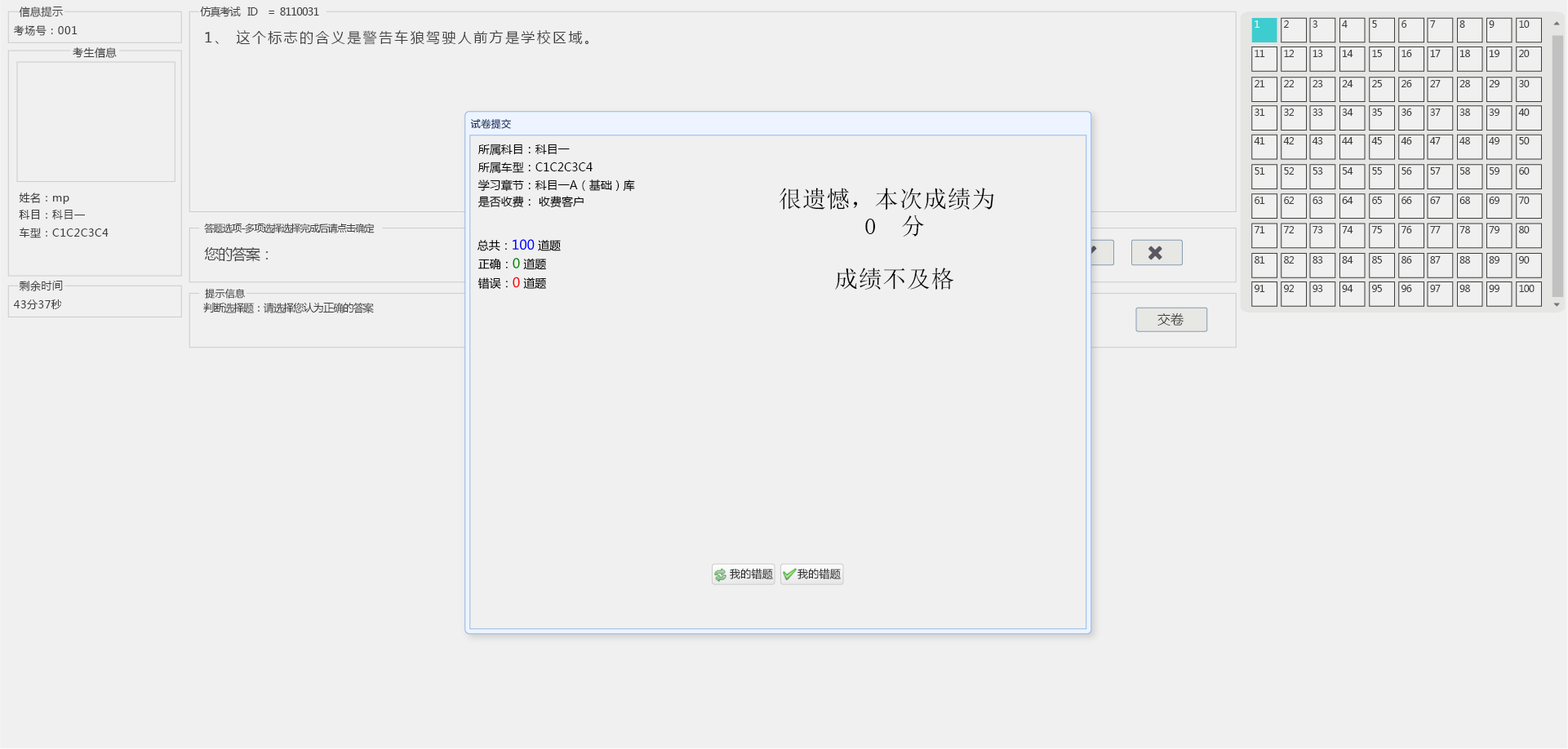
<style>
.page{position:relative;width:1568px;height:749px;background:#f0f0f0}
.page>*{position:absolute;margin:0}
.t1{font:10.6px "MicrosoftYaHei";letter-spacing:0.04em;color:#3e3e3e}
.t2{font:10.6px "MicrosoftYaHei";letter-spacing:-0.06em;color:#3e3e3e}
.t3{font:9.8px "MicrosoftYaHei";letter-spacing:-0.06em;color:#ffffff}
.t4{font:9.8px "MicrosoftYaHei";letter-spacing:-0.06em;color:#3e3e3e}
.t5{font:13.9px "MicrosoftYaHei";letter-spacing:0.14em;color:#3e3e3e}
.t6{font:9.8px "MicrosoftYaHei";letter-spacing:0.04em;color:#0d2d61}
.t7{font:11.4px "MicrosoftYaHei";color:#000000}
.t8{font:11.4px/17px "MicrosoftYaHei";color:#000000}
.t9{font:10.6px/17.6px "MicrosoftYaHei";letter-spacing:0.04em;color:#3e3e3e}
.t10{font:23.7px/27.1px "SimSun";letter-spacing:0.02em;color:#000000}
.t11{font:14.7px "MicrosoftYaHei";letter-spacing:-0.06em;color:#3e3e3e}
.t12{font:23.7px "SimSun";letter-spacing:0.02em;color:#000000}
.t13{font:9.8px "MicrosoftYaHei";letter-spacing:0.02em;color:#3e3e3e}
.t14{font:13.1px "MicrosoftYaHei";color:#3e3e3e}
.t15{font:10.6px "MicrosoftYaHei";letter-spacing:0.02em;color:#333333}
</style>
<div class="page">
<p class="t1" style="left:19px;top:7px;width:44px;height:10px">信息提示</p>
<p class="t2" style="left:200px;top:7px;width:119px;height:10px">仿真考试   ID    =  8110031</p>
<p class="t1" style="left:14px;top:25px;width:64px;height:11px">考场号：001</p>
<p class="t3" style="left:1255px;top:20px;width:4px;height:8px">1</p>
<p class="t4" style="left:1284px;top:20px;width:5px;height:8px">2</p>
<p class="t4" style="left:1313px;top:20px;width:4px;height:8px">3</p>
<p class="t4" style="left:1342px;top:20px;width:6px;height:8px">4</p>
<p class="t4" style="left:1372px;top:20px;width:5px;height:8px">5</p>
<p class="t4" style="left:1401px;top:20px;width:6px;height:8px">6</p>
<p class="t4" style="left:1430px;top:20px;width:6px;height:8px">7</p>
<p class="t4" style="left:1459px;top:20px;width:6px;height:8px">8</p>
<p class="t4" style="left:1489px;top:20px;width:6px;height:8px">9</p>
<p class="t4" style="left:1519px;top:20px;width:11px;height:8px">10</p>
<p class="t5" style="left:205px;top:30px;width:384px;height:15px">1、 这个标志的含义是警告车狼驾驶人前方是学校区域。</p>
<p class="t1" style="left:73px;top:47px;width:44px;height:11px">考生信息</p>
<p class="t4" style="left:1255px;top:50px;width:10px;height:7px">11</p>
<p class="t4" style="left:1284px;top:50px;width:11px;height:7px">12</p>
<p class="t4" style="left:1313px;top:50px;width:10px;height:7px">13</p>
<p class="t4" style="left:1342px;top:50px;width:11px;height:7px">14</p>
<p class="t4" style="left:1372px;top:50px;width:10px;height:7px">15</p>
<p class="t4" style="left:1401px;top:50px;width:11px;height:7px">16</p>
<p class="t4" style="left:1430px;top:50px;width:11px;height:7px">17</p>
<p class="t4" style="left:1459px;top:50px;width:11px;height:7px">18</p>
<p class="t4" style="left:1489px;top:50px;width:10px;height:7px">19</p>
<p class="t4" style="left:1519px;top:50px;width:11px;height:7px">20</p>
<p class="t4" style="left:1255px;top:80px;width:10px;height:7px">21</p>
<p class="t4" style="left:1284px;top:80px;width:11px;height:7px">22</p>
<p class="t4" style="left:1313px;top:80px;width:10px;height:7px">23</p>
<p class="t4" style="left:1342px;top:80px;width:11px;height:7px">24</p>
<p class="t4" style="left:1372px;top:80px;width:10px;height:7px">25</p>
<p class="t4" style="left:1401px;top:80px;width:11px;height:7px">26</p>
<p class="t4" style="left:1430px;top:80px;width:11px;height:7px">27</p>
<p class="t4" style="left:1459px;top:80px;width:11px;height:7px">28</p>
<p class="t4" style="left:1489px;top:80px;width:10px;height:7px">29</p>
<p class="t4" style="left:1519px;top:80px;width:11px;height:7px">30</p>
<p class="t4" style="left:1255px;top:109px;width:10px;height:7px">31</p>
<p class="t4" style="left:1284px;top:109px;width:11px;height:7px">32</p>
<p class="t4" style="left:1313px;top:109px;width:10px;height:7px">33</p>
<p class="t4" style="left:1342px;top:109px;width:11px;height:7px">34</p>
<p class="t4" style="left:1372px;top:109px;width:10px;height:7px">35</p>
<p class="t4" style="left:1401px;top:109px;width:11px;height:7px">36</p>
<p class="t4" style="left:1430px;top:109px;width:11px;height:7px">37</p>
<p class="t4" style="left:1459px;top:109px;width:11px;height:7px">38</p>
<p class="t4" style="left:1489px;top:109px;width:10px;height:7px">39</p>
<p class="t4" style="left:1518px;top:109px;width:12px;height:7px">40</p>
<p class="t6" style="left:470px;top:118px;width:41px;height:11px">试卷提交</p>
<p class="t4" style="left:1254px;top:137px;width:11px;height:7px">41</p>
<p class="t4" style="left:1283px;top:137px;width:12px;height:7px">42</p>
<p class="t4" style="left:1312px;top:137px;width:11px;height:7px">43</p>
<p class="t4" style="left:1342px;top:137px;width:11px;height:7px">44</p>
<p class="t4" style="left:1371px;top:137px;width:11px;height:7px">45</p>
<p class="t4" style="left:1401px;top:137px;width:11px;height:7px">46</p>
<p class="t4" style="left:1429px;top:137px;width:12px;height:7px">47</p>
<p class="t4" style="left:1459px;top:137px;width:11px;height:7px">48</p>
<p class="t4" style="left:1489px;top:137px;width:10px;height:7px">49</p>
<p class="t4" style="left:1519px;top:137px;width:11px;height:7px">50</p>
<p class="t7" style="left:478px;top:144px;width:92px;height:12px">所属科目：科目一</p>
<p class="t7" style="left:478px;top:162px;width:115px;height:12px">所属车型：C1C2C3C4</p>
<p class="t4" style="left:1255px;top:167px;width:10px;height:8px">51</p>
<p class="t4" style="left:1284px;top:167px;width:11px;height:8px">52</p>
<p class="t4" style="left:1313px;top:167px;width:10px;height:8px">53</p>
<p class="t4" style="left:1342px;top:167px;width:11px;height:8px">54</p>
<p class="t4" style="left:1372px;top:167px;width:10px;height:8px">55</p>
<p class="t4" style="left:1401px;top:167px;width:11px;height:8px">56</p>
<p class="t4" style="left:1430px;top:167px;width:11px;height:8px">57</p>
<p class="t4" style="left:1459px;top:167px;width:11px;height:8px">58</p>
<p class="t4" style="left:1489px;top:167px;width:10px;height:8px">59</p>
<p class="t4" style="left:1519px;top:167px;width:11px;height:8px">60</p>
<p class="t8" style="left:478px;top:180px;width:157px;height:28px">学习章节：科目一A（基础）库<br>是否收费： 收费客户</p>
<p class="t9" style="left:19px;top:193px;width:90px;height:45px">姓名：mp<br>科目：科目一<br>车型：C1C2C3C4</p>
<p class="t10" style="left:779px;top:188px;width:215px;height:49px">很遗憾，本次成绩为<br>       0  分</p>
<p class="t4" style="left:1255px;top:197px;width:10px;height:7px">61</p>
<p class="t4" style="left:1284px;top:197px;width:11px;height:7px">62</p>
<p class="t4" style="left:1313px;top:197px;width:10px;height:7px">63</p>
<p class="t4" style="left:1342px;top:197px;width:11px;height:7px">64</p>
<p class="t4" style="left:1372px;top:197px;width:10px;height:7px">65</p>
<p class="t4" style="left:1401px;top:197px;width:11px;height:7px">66</p>
<p class="t4" style="left:1430px;top:197px;width:11px;height:7px">67</p>
<p class="t4" style="left:1459px;top:197px;width:11px;height:7px">68</p>
<p class="t4" style="left:1489px;top:197px;width:10px;height:7px">69</p>
<p class="t4" style="left:1518px;top:197px;width:12px;height:7px">70</p>
<p class="t4" style="left:204px;top:223px;width:171px;height:10px">答题选项-多项选择选择完成后请点击确定</p>
<p class="t4" style="left:1254px;top:226px;width:11px;height:7px">71</p>
<p class="t4" style="left:1283px;top:226px;width:12px;height:7px">72</p>
<p class="t4" style="left:1313px;top:226px;width:10px;height:7px">73</p>
<p class="t4" style="left:1342px;top:226px;width:11px;height:7px">74</p>
<p class="t4" style="left:1371px;top:226px;width:11px;height:7px">75</p>
<p class="t4" style="left:1401px;top:226px;width:11px;height:7px">76</p>
<p class="t4" style="left:1430px;top:226px;width:11px;height:7px">77</p>
<p class="t4" style="left:1459px;top:226px;width:11px;height:7px">78</p>
<p class="t4" style="left:1489px;top:226px;width:10px;height:7px">79</p>
<p class="t4" style="left:1519px;top:226px;width:11px;height:7px">80</p>
<p class="t11" style="left:204px;top:247px;width:65px;height:15px">您的答案：</p>
<p class="t4" style="left:1255px;top:256px;width:10px;height:8px">81</p>
<p class="t4" style="left:1284px;top:256px;width:11px;height:8px">82</p>
<p class="t4" style="left:1313px;top:256px;width:10px;height:8px">83</p>
<p class="t4" style="left:1342px;top:256px;width:11px;height:8px">84</p>
<p class="t4" style="left:1372px;top:256px;width:10px;height:8px">85</p>
<p class="t4" style="left:1401px;top:256px;width:11px;height:8px">86</p>
<p class="t4" style="left:1430px;top:256px;width:11px;height:8px">87</p>
<p class="t4" style="left:1459px;top:256px;width:11px;height:8px">88</p>
<p class="t4" style="left:1489px;top:256px;width:10px;height:8px">89</p>
<p class="t4" style="left:1519px;top:256px;width:11px;height:8px">90</p>
<p class="t12" style="left:835px;top:268px;width:119px;height:22px">成绩不及格</p>
<p class="t1" style="left:19px;top:281px;width:44px;height:10px">剩余时间</p>
<p class="t13" style="left:205px;top:288px;width:40px;height:11px">提示信息</p>
<p class="t4" style="left:1255px;top:285px;width:10px;height:7px">91</p>
<p class="t4" style="left:1284px;top:285px;width:11px;height:7px">92</p>
<p class="t4" style="left:1313px;top:285px;width:10px;height:7px">93</p>
<p class="t4" style="left:1342px;top:285px;width:11px;height:7px">94</p>
<p class="t4" style="left:1372px;top:285px;width:10px;height:7px">95</p>
<p class="t4" style="left:1401px;top:285px;width:11px;height:7px">96</p>
<p class="t4" style="left:1430px;top:285px;width:11px;height:7px">97</p>
<p class="t4" style="left:1459px;top:285px;width:11px;height:7px">98</p>
<p class="t4" style="left:1489px;top:285px;width:10px;height:7px">99</p>
<p class="t4" style="left:1519px;top:285px;width:16px;height:7px">100</p>
<p class="t1" style="left:13px;top:300px;width:49px;height:9px">43分37秒</p>
<p class="t2" style="left:203px;top:302px;width:171px;height:11px">判断选择题：请选择您认为正确的答案</p>
<p class="t14" style="left:1157px;top:313px;width:27px;height:13px">交卷</p>
<p class="t15" style="left:730px;top:568px;width:43px;height:12px">我的错题</p>
<p class="t15" style="left:797px;top:568px;width:44px;height:12px">我的错题</p>
</div>
